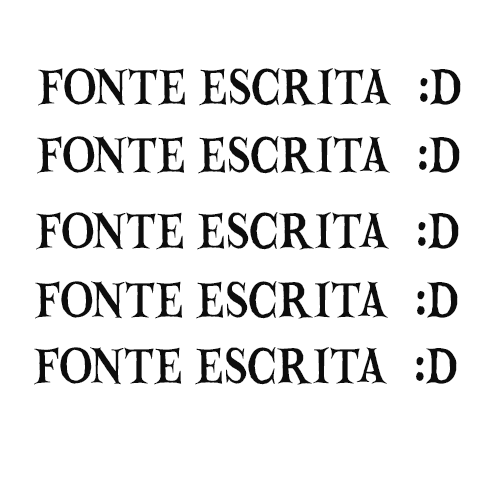
<style>
.page{position:relative;width:500px;height:500px;background:#ffffff}
.page>*{position:absolute;margin:0}
.t1{font:48px "HappyHalloweenRegular";color:#0d0d0d}
</style>
<div class="page">
<p class="t1" style="left:38px;top:68px;width:423px;height:38px">FONTE ESCRITA  :D</p>
<p class="t1" style="left:37px;top:136px;width:423px;height:38px">FONTE ESCRITA  :D</p>
<p class="t1" style="left:36px;top:212px;width:423px;height:38px">FONTE ESCRITA  :D</p>
<p class="t1" style="left:35px;top:281px;width:423px;height:38px">FONTE ESCRITA  :D</p>
<p class="t1" style="left:34px;top:347px;width:423px;height:38px">FONTE ESCRITA  :D</p>
</div>
